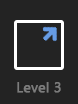
<style>
.page{position:relative;width:78px;height:104px;background:#232323}
.page>*{position:absolute;margin:0}
.t1{font:14px "SegoeUI";color:#7c7c7c;font-weight:bold}
</style>
<div class="page">
<p class="t1" style="left:17px;top:82px;width:44px;height:11px">Level 3</p>
</div>
